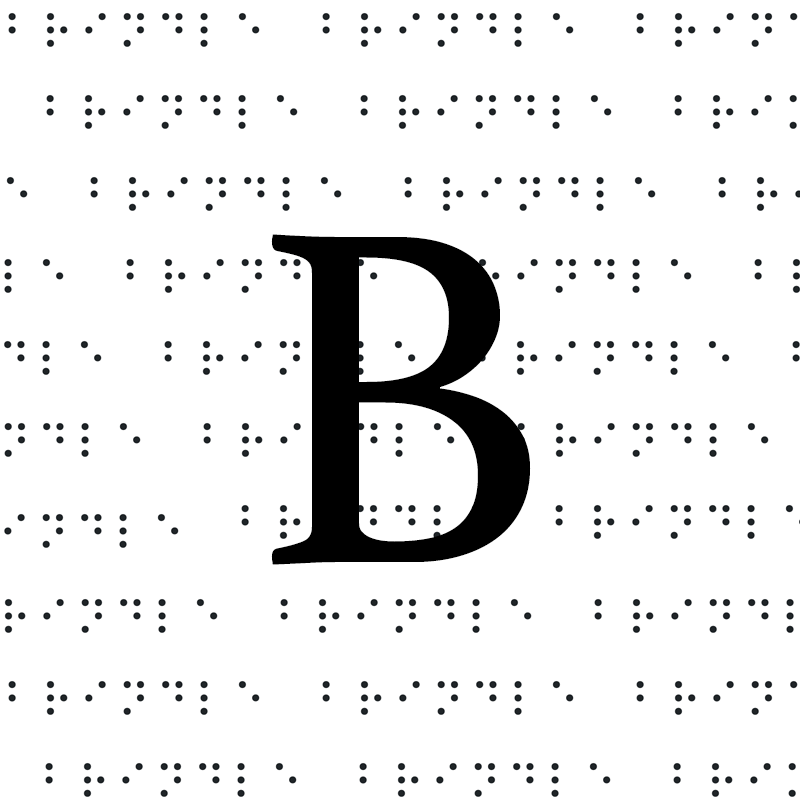
<style>
.page{position:relative;width:800px;height:800px;background:#ffffff}
.page>*{position:absolute;margin:0}
.t1{font:500px "Athelas-Regular";color:#000000}
</style>
<div class="page">
<p class="t1" style="left:271px;top:234px;width:260px;height:331px">B</p>
</div>
